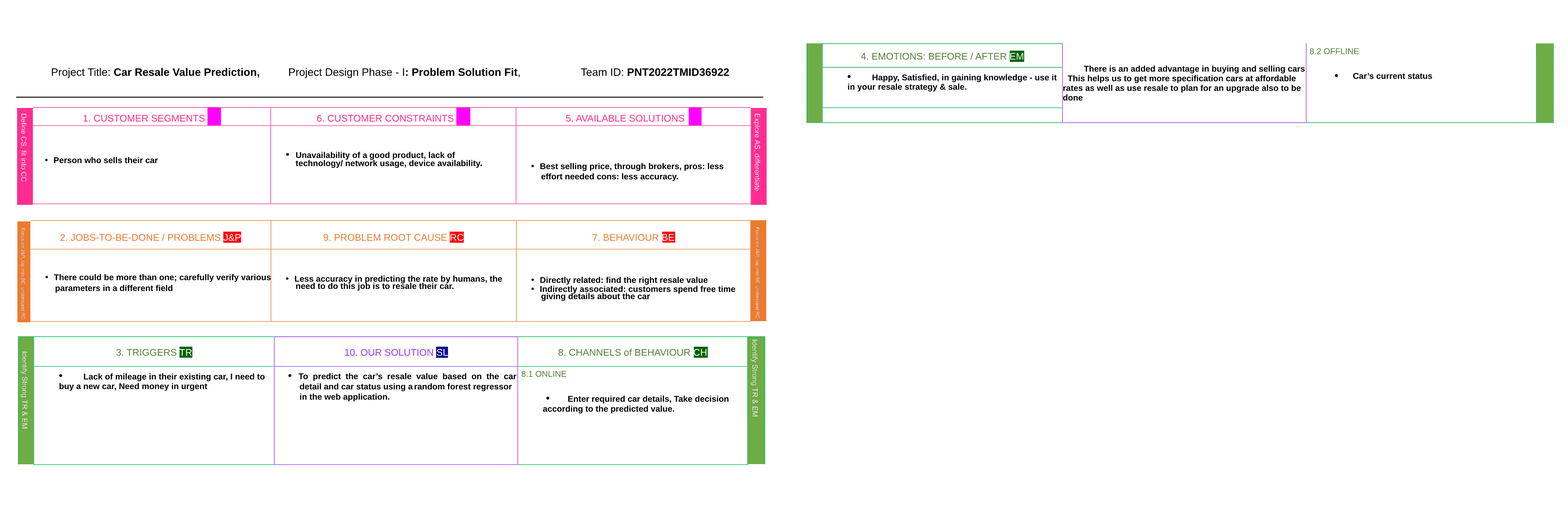
<style>
.page{position:relative;width:1568px;height:520px;background:#ffffff}
.page>*{position:absolute;margin:0}
.t1{font:9.6px "ArialMT";color:#528135}
.t2{font:9.6px "ArialMT";letter-spacing:0.001em;color:#528135}
.t3{font:9.6px "ArialMT";letter-spacing:0.003em;color:#ffffff}
.t4{font:8.4px "ArialMT";color:#528135}
.t5{font:8.4px/9.7px "Arial-BoldMT";color:#000000}
.t6{font:8.4px/9.8px "ArialMT";color:#000000}
.t7{font:8.4px/9.7px "Arial-BoldMT";letter-spacing:-0.006em;color:#000000}
.t8{font:8.4px/9.7px "Arial-BoldMT";letter-spacing:-0.001em;color:#000000}
.t9{font:10.8px "Arial-BoldMT";color:#000000}
.t10{font:10.8px "ArialMT";color:#000000}
.t11{font:10.8px "Arial-BoldMT";letter-spacing:0.004em;color:#000000}
.t12{font:8.4px/9.5px "Arial-BoldMT";color:#000000}
.t13{font:8.4px/12.4px "Arial-BoldMT";color:#000000}
.t14{font:8.4px/12.4px "Arial-BoldMT";letter-spacing:0.006em;color:#000000}
.t15{font:8.4px/9.5px "Arial-BoldMT";letter-spacing:0.006em;color:#000000}
.t16{font:8.4px "Arial-BoldMT";color:#000000}
.t17{font:9.6px "ArialMT";color:#ff2d91}
.t18{font:9.6px "ArialMT";letter-spacing:0.001em;color:#ff2d91}
.t19{font:9.6px "ArialMT";color:#ffffff}
.t20{font:8.4px "SymbolMT";color:#000000}
.t21{font:8.4px "Arial-BoldMT";letter-spacing:-0.001em;color:#000000}
.t22{font:8.4px/7.9px "Arial-BoldMT";color:#000000}
.t23{font:8.4px/6.9px "Arial-BoldMT";color:#000000}
.t24{font:8.4px/6.9px "Arial-BoldMT";letter-spacing:0.006em;color:#000000}
.t25{font:8.4px/6.9px "Arial-BoldMT";letter-spacing:-0.013em;color:#000000}
.t26{font:9.6px/7.9px "Arial-BoldMT";color:#000000}
.t27{font:8.4px/10.4px "Arial-BoldMT";color:#000000}
.t28{font:8.4px/10.4px "SymbolMT";color:#000000}
.t29{font:8.4px/10.2px "Arial-BoldMT";color:#000000}
.t30{font:9.6px "ArialMT";color:#ec7c30}
.t31{font:9.6px "ArialMT";letter-spacing:0.001em;color:#ec7c30}
.t32{font:9.6px "ArialMT";letter-spacing:-0.003em;color:#ec7c30}
.t33{font:9.6px "ArialMT";letter-spacing:0.003em;color:#ec7c30}
.t34{font:9.6px "ArialMT";letter-spacing:0.012em;color:#ffffff}
.t35{font:8.4px/10.2px "SymbolMT";color:#000000}
.t36{font:8.4px/10.2px "Arial-BoldMT";letter-spacing:0.006em;color:#000000}
.t37{font:8.4px/10.7px "Arial-BoldMT";color:#000000}
.t38{font:8.4px/10.7px "Arial-BoldMT";letter-spacing:-0.006em;color:#000000}
.t39{font:8.4px/10.7px "Arial-BoldMT";letter-spacing:-0.001em;color:#000000}
.t40{font:8.4px/10.7px "SymbolMT";color:#000000}
.t41{font:8.4px/10.7px "Arial-BoldMT";letter-spacing:0.006em;color:#000000}
.t42{font:8.4px/7.1px "Arial-BoldMT";color:#000000}
.t43{font:8.4px/7.1px "Arial-BoldMT";letter-spacing:-0.012em;color:#000000}
.t44{font:8.4px/7.1px "Arial-BoldMT";letter-spacing:0.006em;color:#000000}
.t45{font:8.4px/9.2px "Arial-BoldMT";color:#000000}
.t46{font:8.4px/7.1px "SymbolMT";color:#000000}
.t47{font:8.4px/9.2px "SymbolMT";color:#000000}
.t48{font:8.4px/7.2px "Arial-BoldMT";color:#000000}
.t49{font:9.6px "ArialMT";letter-spacing:0.009em;color:#ffffff}
.t50{font:9.6px "ArialMT";color:#9337ff}
.t51{font:9.6px "ArialMT";letter-spacing:0.001em;color:#9337ff}
.t52{font:8.4px/9.8px "Arial-BoldMT";color:#000000}
.t53{font:8.4px/9.8px "Arial-BoldMT";letter-spacing:0.006em;color:#000000}
.t54{font:8.4px/9.8px "Arial-BoldMT";letter-spacing:-0.061em;color:#000000}
.t55{font:8.4px/12.5px "Arial-BoldMT";color:#000000}
.t56{font:8.4px/12.5px "Arial-BoldMT";letter-spacing:-0.001em;color:#000000}
.t57{font:8.4px/9.8px "Arial-BoldMT";letter-spacing:-0.012em;color:#000000}
</style>
<div class="page">
<p class="t1" style="left:861px;top:52px;width:162px;height:8px"><span class="t2">4.</span> EMOTIONS: BEFORE / AFTER <span class="t3">EM</span></p>
<p class="t4" style="left:1310px;top:48px;width:49px;height:6px">8.2 OFFLINE</p>
<p class="t5" style="left:1063px;top:65px;width:242px;height:36px"><span class="t6"> <br> </span><br>         There is an added advantage in buying an<span class="t7">d </span>selling cars  <br>  This helps us to get more specification car<span class="t8">s at</span> affordable <br>rates as well as use resale to plan for an upgrade also to be <br>done</p>
<p class="t9" style="left:52px;top:68px;width:207px;height:10px"><span class="t10">Project Title: </span>Car Resale Value Prediction,</p>
<p class="t10" style="left:289px;top:68px;width:231px;height:10px">Project Design Phase - I<span class="t9">: Problem Solution </span><span class="t11">Fit</span>,</p>
<p class="t9" style="left:581px;top:68px;width:148px;height:8px"><span class="t10">Team ID: </span>PNT2022TMID36922</p>
<p class="t10" style="left:847px;top:75px;width:4px;height:3px">•</p>
<p class="t12" style="left:848px;top:74px;width:209px;height:17px;text-align:right"><span class="t13">Happy, Satisfied, </span><span class="t14">in</span><span class="t13"> gaining knowledge - use </span><span class="t14">it </span><span class="t15"><br>in</span> your resale strategy &amp; sale.</p>
<p class="t10" style="left:1335px;top:74px;width:3px;height:3px"><span class="t9"> </span><br>•</p>
<p class="t16" style="left:1353px;top:73px;width:79px;height:6px">Car’s current status</p>
<p class="t17" style="left:83px;top:115px;width:138px;height:7px"><span class="t18">1.</span> CUSTOMER SEGMENTS <span class="t19">CS</span></p>
<p class="t17" style="left:317px;top:115px;width:153px;height:7px"><span class="t18">6.</span> CUSTOMER CONSTRAINTS <span class="t19">CC</span></p>
<p class="t17" style="left:566px;top:115px;width:133px;height:7px"><span class="t18">5.</span> AVAILABLE SOLUTIONS <span class="t3">AS</span></p>
<p class="t16" style="left:45px;top:157px;width:113px;height:6px"><span class="t20">• </span> Person who sells their <span class="t21">car</span></p>
<p class="t22" style="left:296px;top:152px;width:186px;height:16px"><span class="t23">Unavailability </span><span class="t24">of </span><span class="t25">a </span><span class="t23">good product, lack of </span><br>technology/ network usage, device availability<span class="t26">.</span></p>
<p class="t27" style="left:531px;top:163px;width:193px;height:18px"><span class="t28">• </span> Best selling price, through brokers, pros: less <span class="t29"><br>effort needed cons: less accuracy.</span></p>
<p class="t30" style="left:60px;top:233px;width:181px;height:8px"><span class="t31">2.</span> JOBS-<span class="t32">TO</span>-<span class="t33">BE</span>-DONE / PROBLEMS<span class="t19"> J&amp;P</span></p>
<p class="t30" style="left:324px;top:234px;width:140px;height:7px"><span class="t31">9.</span> PROBLEM ROOT CAUSE <span class="t34">RC</span></p>
<p class="t30" style="left:593px;top:234px;width:81px;height:7px"><span class="t31">7.</span> BEHAVIOUR <span class="t3">BE</span></p>
<p class="t29" style="left:45px;top:274px;width:226px;height:19px"><span class="t35">• </span> There could <span class="t36">be</span> more than one; carefully verify various <span class="t37"><br>parameters </span><span class="t38">in </span><span class="t39">a </span><span class="t37">different field</span></p>
<p class="t37" style="left:286px;top:275px;width:216px;height:16px"><span class="t40">• </span> Less accuracy <span class="t41">in</span> predicting the rate <span class="t41">by</span> humans, the <span class="t42"><br>need </span><span class="t43">to</span><span class="t42"> do this job </span><span class="t44">is </span><span class="t43">to</span><span class="t42"> resale their car.</span></p>
<p class="t45" style="left:531px;top:276px;width:204px;height:25px"><span class="t46">• </span><span class="t42"> Directly related: ﬁ</span><span class="t44">nd</span><span class="t42"> the right resale value </span><span class="t47"><br>• </span> Indirectly associated: customers spend free time <span class="t48"><br>giving details about the car</span></p>
<p class="t1" style="left:116px;top:349px;width:76px;height:7px"><span class="t2">3.</span> TRIGGERS <span class="t49">TR</span></p>
<p class="t50" style="left:345px;top:349px;width:103px;height:7px"><span class="t51">10.</span> OUR SOLUTION <span class="t3">SL</span></p>
<p class="t1" style="left:558px;top:348px;width:148px;height:8px"><span class="t2">8.</span> CHANNELS of BEHAVIOUR <span class="t34">CH</span></p>
<p class="t10" style="left:59px;top:374px;width:3px;height:3px">•</p>
<p class="t48" style="left:59px;top:373px;width:206px;height:18px;text-align:right">Lack of mileage in their existing car, I need to <span class="t52"><br>buy a new car, Need money </span><span class="t53">in</span><span class="t52"> urgent</span></p>
<p class="t16" style="left:288px;top:373px;width:228px;height:8px"><span class="t10">•   </span>To  predict  the  car’s  resale  value  based  on  the  car</p>
<p class="t4" style="left:521px;top:370px;width:45px;height:7px">8.1 ONLINE</p>
<p class="t52" style="left:300px;top:383px;width:212px;height:18px">detail and car status using <span class="t54">a </span>random forest regressor <span class="t36"><br>in</span><span class="t29"> the web application.</span></p>
<p class="t55" style="left:543px;top:395px;width:186px;height:18px;text-align:right">Enter required <span class="t56">car</span> details, Take decision <span class="t52"><br>according </span><span class="t57">to</span><span class="t52"> the predicted value.</span></p>
<p class="t10" style="left:546px;top:396px;width:3px;height:3px"><span class="t9"> </span><br>•</p>
</div>
